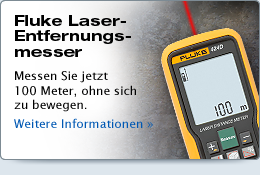
<style>
.page{position:relative;width:260px;height:175px}
.page>*{position:absolute;margin:0}
.t1{font:15px/15.5px "HelveticaNeueLTStd-BdEx";color:#000000}
.t2{font:12px "LucidaSans";color:#000000}
.t3{font:12px/14.4px "LucidaSans";color:#0058b3}
</style>
<div class="page">
<p class="t1" style="left:15px;top:15px;width:116px;height:42px">Fluke Laser-<br>Entfernungs-<br>messer</p>
<p class="t2" style="left:14px;top:71px;width:139px;height:57px">Messen Sie jetzt <br>100 Meter, ohne sich zu bewegen.<br><span class="t3">Weitere Informationen »</span></p>
</div>
